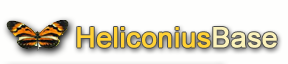
<style>
.page{position:relative;width:288px;height:64px;background:#fefefd}
.page>*{position:absolute;margin:0}
.t1{font:27.9px "ArialMT";color:#ffd134;font-weight:bold}
.t2{font:27.9px "ArialMT";color:#fbf2ba;font-weight:bold}
</style>
<div class="page">
<p class="t1" style="left:77px;top:27px;width:200px;height:21px">Heliconius<span class="t2">Base</span></p>
</div>
